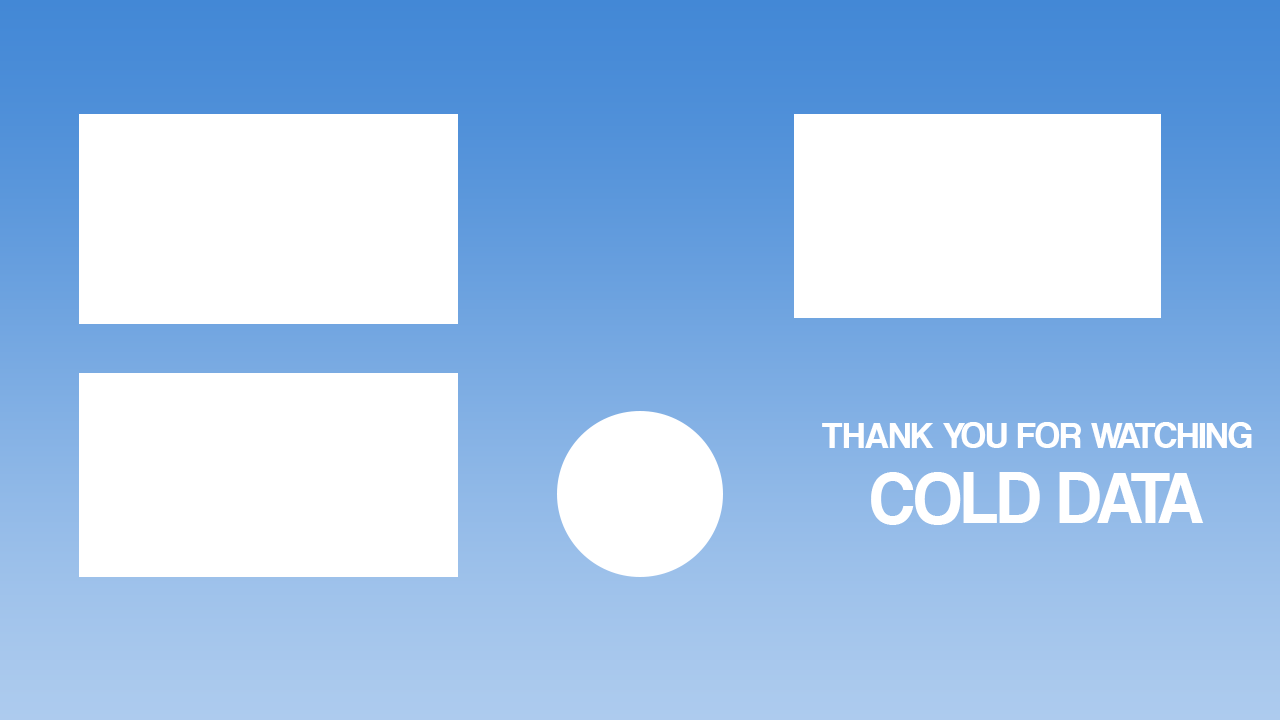
<style>
.page{position:relative;width:1280px;height:720px;background:#ffffff}
.page>*{position:absolute;margin:0}
.t1{font:37.3px "CoolveticaRg-Regular";color:#ffffff}
.t2{font:74.4px "CoolveticaRg-Regular";color:#ffffff;scale:0.96 1}
</style>
<div class="page">
<p class="t1" style="left:822px;top:422px;width:430px;height:26px">THANK YOU FOR WATCHING</p>
<p class="t2" style="left:871px;top:472px;width:333px;height:53px">COLD DATA</p>
</div>
